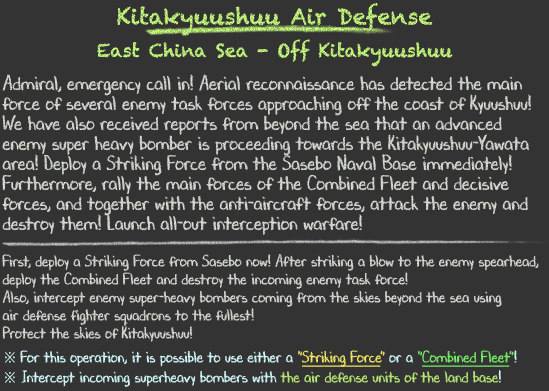
<style>
.page{position:relative;width:549px;height:391px;background:#333333}
.page>*{position:absolute;margin:0}
.t1{font:18px/36px "Chalkduster"}
.t2{font:22px/36px "Chalkduster"}
.t3{font:20px/20px "DJBChalkItUp";color:#d9ded6;scale:0.9 1}
.t4{font:16px/18px "DJBChalkItUp";color:#d9ded6;scale:0.9 1}
.t5{font:16px/24px "DJBChalkItUp";color:#d9ded6;scale:0.9 1}
.t6{font:16px/20px "TimesNewRomanPSMT";color:#d7feff;scale:0.9 1}
.t7{font:16px/20px "DJBChalkItUp";color:#d7feff;scale:0.9 1}
.t8{font:16px/20px "DJBChalkItUp";color:#f5ed68;scale:0.9 1}
.t9{font:16px/20px "DJBChalkItUp";color:#f5ed68;text-decoration:underline;scale:0.9 1}
.t10{font:16px/20px "DJBChalkItUp";color:#7bf26b;scale:0.9 1}
.t11{font:16px/20px "DJBChalkItUp";color:#7bf26b;text-decoration:underline;scale:0.9 1}
.t12{font:16px/20px "DJBChalkItUp";color:#bdef78;scale:0.9 1}
</style>
<div class="page">
<p class="t1" style="left:97px;top:3px;width:356px;height:64px;text-align:center"><span class="t2">Kitakyuushuu Air Defense<br></span>East China Sea - Off Kitakyuushuu</p>
<p class="t3" style="left:2px;top:74px;width:537px;height:313px">Admiral, emergency call in! Aerial reconnaissance has detected the main<br>force of several enemy task forces approaching off the coast of Kyuushuu!<br>We have also received reports from beyond the sea that an advanced<br>enemy super heavy bomber is proceeding towards the Kitakyuushuu-Yawata<br>area! Deploy a Striking Force from the Sasebo Naval Base immediately!<br>Furthermore, rally the main forces of the Combined Fleet and decisive<br>forces, and together with the anti-aircraft forces, attack the enemy and<br>destroy them! Launch all-out interception warfare!<br><br><span class="t4">First, deploy a Striking Force from Sasebo now! After striking a blow to the enemy spearhead,<br>deploy the Combined Fleet and destroy the incoming enemy task force!<br>Also, intercept enemy super-heavy bombers coming from the skies beyond the sea using<br>air defense fighter squadrons to the fullest!<br></span><span class="t5">Protect the skies of Kitakyuushuu!<br></span><span class="t6">※ </span><span class="t7">For this operation, it is possible to use either a </span><span class="t8">"</span><span class="t9">Striking Force</span><span class="t8">"</span><span class="t7"> or a </span><span class="t10">"</span><span class="t11">Combined Fleet</span><span class="t10">"</span><span class="t7">!<br></span><span class="t6">※</span><span class="t7"> Intercept incoming superheavy bombers with </span><span class="t12">the air defense units of the land base</span><span class="t7">!</span></p>
</div>
